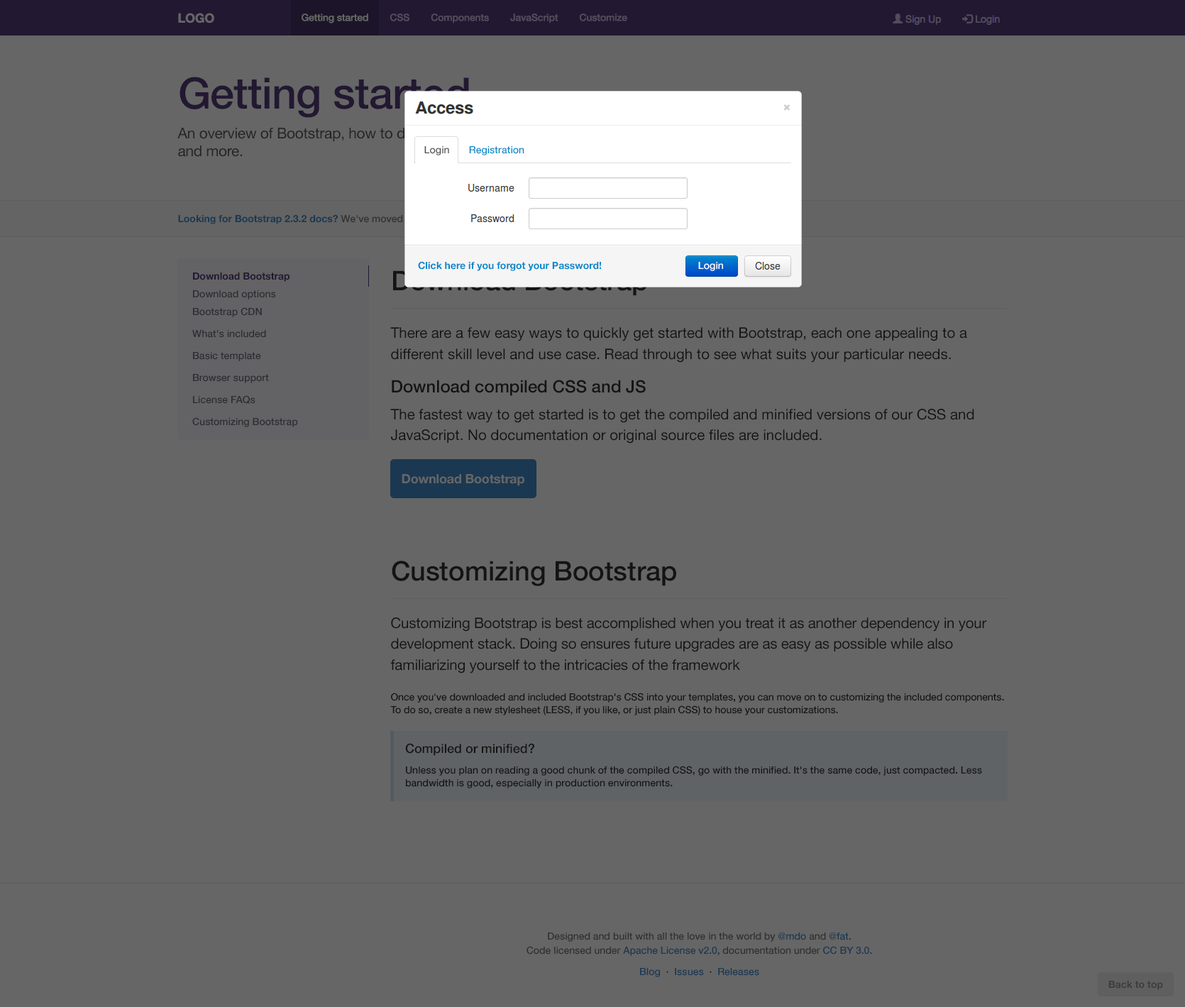
<style>
.page{position:relative;width:1185px;height:1007px;background:#666666}
.page>*{position:absolute;margin:0}
.t1{font:12.8px "HelveticaNeue-Bold";letter-spacing:-0.01em;color:#666666}
.t2{font:9.9px "HelveticaNeue-Medium";letter-spacing:-0.01em;color:#524c5b}
.t3{font:9.9px "HelveticaNeue-Medium";color:#0088cc}
.t4{font:9.9px "HelveticaNeue-Medium";color:#555555}
.t5{font:9.9px "HelveticaNeue-Bold";color:#0088cc}
.t6{font:9.9px "HelveticaNeue-Medium";color:#ffffff}
.t7{font:9.9px/22px "HelveticaNeue-Medium";color:#2d2b31}
.t8{font:9.9px/17.7px "HelveticaNeue-Bold";color:#2d2b31}
.t9{font:9.9px/17.7px "HelveticaNeue-Medium";color:#2d2b31}
.t10{font:14.5px/20.9px "HelveticaNeue";letter-spacing:-0.01em;color:#141414}
.t11{font:27px/17.7px "HelveticaNeue-Medium";color:#141414}
.t12{font:9.9px/12.8px "HelveticaNeue-Medium";letter-spacing:-0.01em;color:#141414}
.t13{font:9.9px/12.8px "HelveticaNeue-Medium";color:#141414}
.t14{font:12.8px/12.8px "HelveticaNeue-Medium";color:#141414}
.t15{font:7.8px/7.8px "HelveticaNeue-Medium";color:#141414}
.t16{font:9.9px/14.2px "HelveticaNeue-Medium";letter-spacing:-0.005em}
.t17{font:9.9px/21.3px "HelveticaNeue-Medium"}
.t18{font:9.9px "HelveticaNeue-Bold";color:#3d3d3d}
</style>
<div class="page">
<p class="t1" style="left:178px;top:13px;width:36px;height:10px">LOGO</p>
<p class="t2" style="left:301px;top:13px;width:326px;height:10px">Getting started        CSS        Components        JavaScript        Customize</p>
<p class="t3" style="left:424px;top:146px;width:100px;height:9px"><span class="t4">Login</span>       Registration</p>
<p class="t5" style="left:418px;top:261px;width:183px;height:10px">Click here if you forgot your Password!</p>
<p class="t6" style="left:698px;top:262px;width:25px;height:9px">Login</p>
<p class="t7" style="left:192px;top:272px;width:106px;height:155px"><span class="t8">Download Bootstrap<br></span><span class="t9">Download options<br>Bootstrap CDN<br></span>What's included<br>Basic template<br>Browser support<br>License FAQs<br>Customizing Bootstrap</p>
<p class="t1" style="left:401px;top:474px;width:123px;height:12px">Download Bootstrap</p>
<p class="t10" style="left:390px;top:560px;width:614px;height:155px"><span class="t11">Customizing Bootstrap<br><br></span>Customizing Bootstrap is best accomplished when you treat it as another dependency in your development stack. Doing so ensures future upgrades are as easy as possible while also familiarizing yourself to the intricacies of the framework<br><br><br><br><span class="t12">Once you've downloaded and included Bootstrap's CSS into your templates, you can move on to customizing the included components. To do so, create a new stylesheet (LESS, if you like, or just plain CSS) to house your customizations.</span></p>
<p class="t13" style="left:405px;top:743px;width:577px;height:45px"><span class="t14">Compiled or minified?<br></span><span class="t15"><br></span>Unless you plan on reading a good chunk of the compiled CSS, go with the minified. It's the same code, just compacted. Less bandwidth is good, especially in production environments.</p>
<p class="t16" style="left:526px;top:931px;width:346px;height:46px;text-align:center">Designed and built with all the love in the world by @mdo and @fat.<br>Code licensed under Apache License v2.0, documentation under CC BY 3.0.<br><span class="t17">Blog  </span><span class="t17">· </span><span class="t17"> Issues  </span><span class="t17">·</span><span class="t17">  Releases</span></p>
<p class="t18" style="left:1108px;top:980px;width:55px;height:10px">Back to top</p>
</div>
